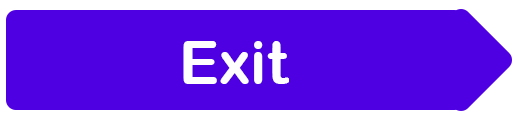
<style>
.page{position:relative;width:531px;height:120px;background:#4f00e2}
.page>*{position:absolute;margin:0}
.t1{font:60px "ArialRoundedMTBold";color:#fefefe}
</style>
<div class="page">
<p class="t1" style="left:183px;top:41px;width:106px;height:43px">Exit</p>
</div>
